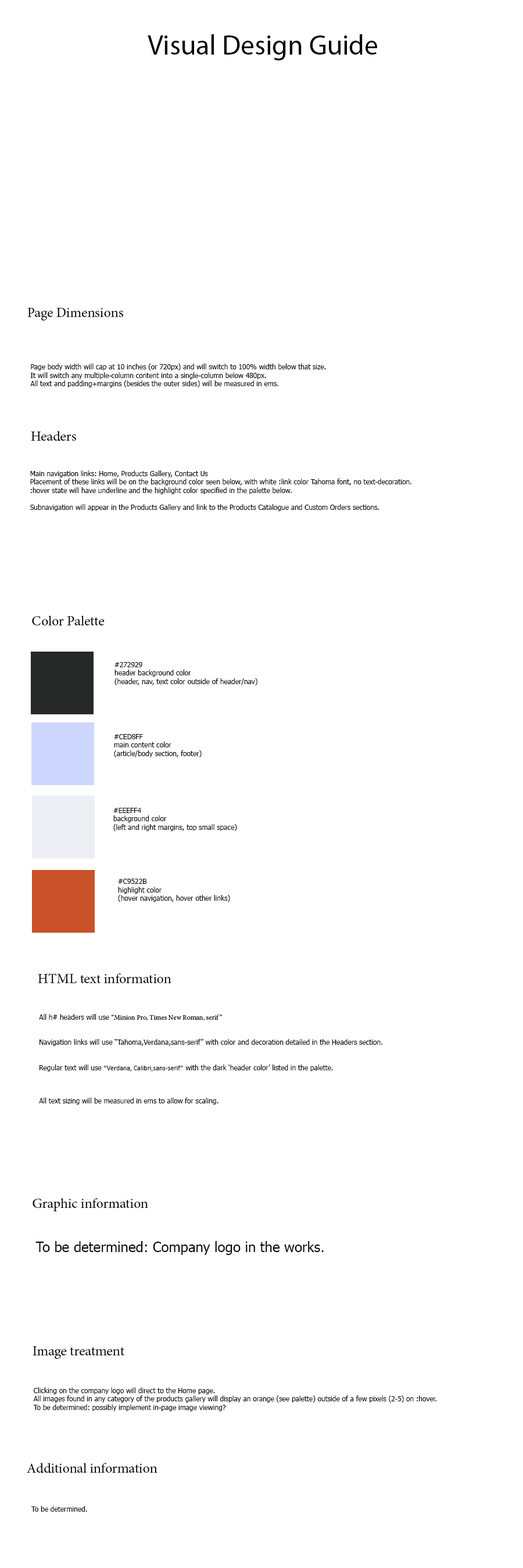
<style>
.page{position:relative;width:523px;height:1568px;background:#ffffff}
.page>*{position:absolute;margin:0}
.t1{font:27.9px "MyriadPro-Regular";color:#000000}
.t2{font:13.9px "MinionPro-Regular";color:#000000}
.t3{font:7px "Tahoma";color:#000000}
.t4{font:7px "MinionPro-Regular";color:#000000}
.t5{font:7px "Calibri";color:#000000}
.t6{font:13.9px "Tahoma";color:#000000}
</style>
<div class="page">
<p class="t1" style="left:148px;top:34px;width:229px;height:26px">Visual Design Guide</p>
<p class="t2" style="left:27px;top:308px;width:96px;height:13px">Page Dimensions</p>
<p class="t3" style="left:30px;top:364px;width:296px;height:23px">Page body width will cap at 10 inches (or 720px) and will switch to 100% width below that size.<br>It will switch any multiple-column content into a single-column below 480px.<br>All text and padding+margins (besides the outer sides) will be measured in ems.</p>
<p class="t2" style="left:31px;top:431px;width:45px;height:10px">Headers</p>
<p class="t3" style="left:30px;top:470px;width:381px;height:41px">Main navigation links: Home, Products Gallery, Contact Us<br>Placement of these links will be on the background color seen below, with white :link color Tahoma font, no text-decoration.<br>:hover state will have underline and the highlight color specified in the palette below.<br><br>Subnavigation will appear in the Products Gallery and link to the Products Catalogue and Custom Orders sections.</p>
<p class="t2" style="left:32px;top:616px;width:73px;height:9px">Color Palette</p>
<p class="t3" style="left:118px;top:879px;width:112px;height:23px">#C9522B<br>highlight color<br>(hover navigation, hover other links)</p>
<p class="t2" style="left:38px;top:973px;width:133px;height:10px">HTML text information</p>
<p class="t3" style="left:39px;top:1014px;width:343px;height:91px">All h# headers will use <span class="t4">“Minion Pro, Times New Roman, serif”<br><br><br></span>Navigation links will use “Tahoma,Verdana,sans-serif” with color and decoration detailed in the Headers section.<br><br><br>Regular text will use <span class="t5">“Verdana, Calibri,sans-serif”</span> with the dark ‘header color’ listed in the palette.<br><br><br><br>All text sizing will be measured in ems to allow for scaling.</p>
<p class="t2" style="left:33px;top:1198px;width:115px;height:13px">Graphic information</p>
<p class="t6" style="left:35px;top:1241px;width:288px;height:14px">To be determined: Company logo in the works.</p>
<p class="t2" style="left:33px;top:1346px;width:91px;height:13px">Image treatment</p>
<p class="t3" style="left:33px;top:1387px;width:403px;height:24px">Clicking on the company logo will direct to the Home page.<br>All images found in any category of the products gallery will display an orange (see palette) outside of a few pixels (2-5) on :hover.<br>To be determined: possibly implement in-page image viewing?</p>
<p class="t2" style="left:27px;top:1463px;width:130px;height:10px">Additional information</p>
<p class="t3" style="left:31px;top:1506px;width:56px;height:6px">To be determined.</p>
</div>
